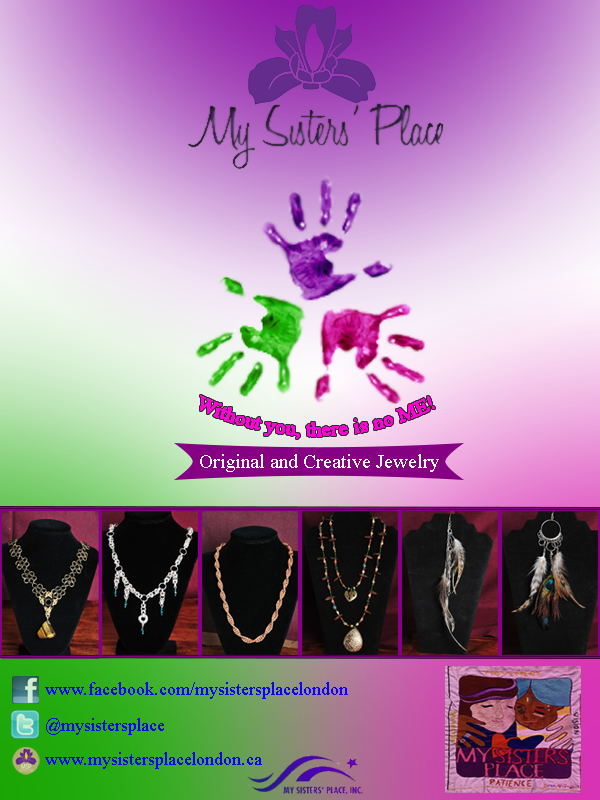
<style>
.page{position:relative;width:600px;height:800px}
.page>*{position:absolute;margin:0}
.t1{font:20px "TimesNewRomanPSMT";color:#ff00d8}
.t2{font:20px "TimesNewRomanPSMT";color:#ffffff}
.t3{font:18px "TimesNewRomanPSMT";color:#0c00ff}
</style>
<div class="page">
<p class="t1" style="left:200px;top:395px;width:235px;height:44px">Without you, there is no ME!</p>
<p class="t2" style="left:200px;top:454px;width:239px;height:18px">Original and Creative Jewelry</p>
<p class="t3" style="left:45px;top:682px;width:303px;height:17px">www.facebook.com/mysistersplacelondon</p>
<p class="t3" style="left:46px;top:718px;width:118px;height:17px">@mysistersplace</p>
<p class="t3" style="left:45px;top:752px;width:217px;height:17px">www.mysistersplacelondon.ca</p>
</div>
